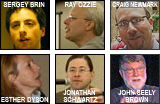
<style>
.page{position:relative;width:160px;height:104px}
.page>*{position:absolute;margin:0}
.t1{font:7px "ArialNarrow";letter-spacing:0.029em;color:#ffffff}
.t2{font:7px "ArialNarrow";letter-spacing:0.005em;color:#ffffff;scale:0.9 1}
.t3{font:7px/7px "ArialNarrow";letter-spacing:0.029em;color:#ffffff}
</style>
<div class="page">
<p class="t1" style="left:3px;top:2px;width:42px;height:5px">SERGEY BRIN</p>
<p class="t1" style="left:65px;top:2px;width:31px;height:5px">RAY OZZIE</p>
<p class="t2" style="left:112px;top:2px;width:46px;height:5px">CRAIG NEWMARK</p>
<p class="t1" style="left:1px;top:97px;width:47px;height:5px">ESTHER DYSON</p>
<p class="t3" style="left:63px;top:90px;width:35px;height:12px;text-align:center">JONATHAN <br>SCHWARTZ</p>
<p class="t3" style="left:118px;top:90px;width:38px;height:12px;text-align:center">JOHN SEELY<br>BROWN</p>
</div>
